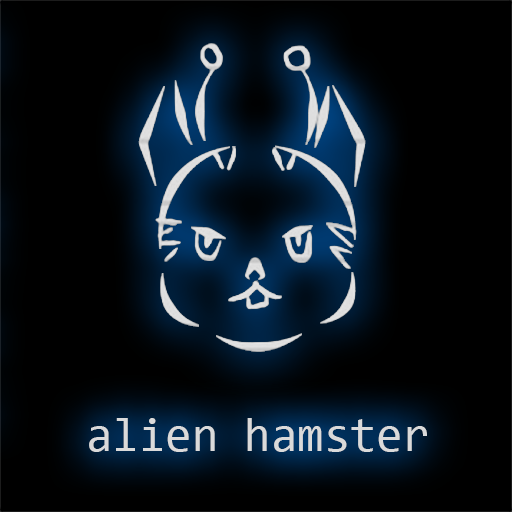
<style>
.page{position:relative;width:512px;height:512px;background:#000000}
.page>*{position:absolute;margin:0}
.t1{font:48px "Consolas";color:#dadada}
</style>
<div class="page">
<p class="t1" style="left:89px;top:418px;width:338px;height:34px">alien hamster</p>
</div>
